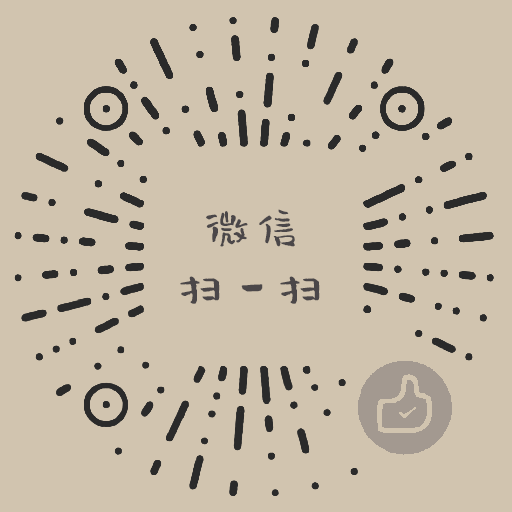
<style>
.page{position:relative;width:512px;height:512px;background:#d1c4af}
.page>*{position:absolute;margin:0}
.t1{font:50px/60px "XiQuexiaoqingsong-regular";color:#4b4749}
</style>
<div class="page">
<p class="t1" style="left:180px;top:209px;width:140px;height:95px;text-align:center">微信<br>扫一扫</p>
</div>
